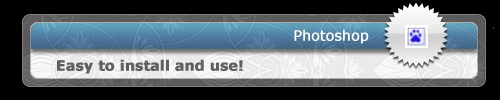
<style>
.page{position:relative;width:500px;height:100px;background:#000000}
.page>*{position:absolute;margin:0}
.t1{font:14px "Verdana";letter-spacing:-0.01em;color:#ffffff;font-weight:bold}
.t2{font:14px "Verdana-Bold";letter-spacing:-0.01em;color:#5f5f5f;font-weight:bold}
</style>
<div class="page">
<p class="t1" style="left:294px;top:29px;width:75px;height:15px">Photoshop</p>
<p class="t2" style="left:57px;top:59px;width:186px;height:15px">Easy to install and use!</p>
</div>
